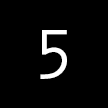
<style>
.page{position:relative;width:108px;height:108px;background:#000000}
.page>*{position:absolute;margin:0}
.t1{font:72px "OratorStd";color:#ffffff}
</style>
<div class="page">
<p class="t1" style="left:40px;top:30px;width:27px;height:49px">5</p>
</div>
